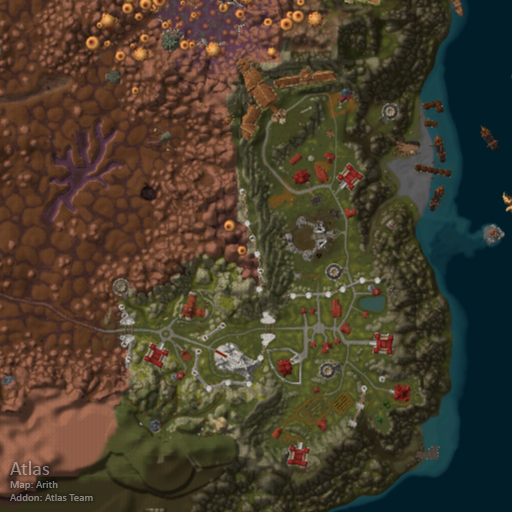
<style>
.page{position:relative;width:512px;height:512px}
.page>*{position:absolute;margin:0}
.t1{font:11px "Calibri";color:#8c847f}
.t2{font:20px "Calibri";color:#8c847f}
</style>
<div class="page">
<p class="t1" style="left:10px;top:461px;width:83px;height:40px"><span class="t2">Atlas<br></span>Map: Arith<br>Addon: Atlas Team</p>
</div>
